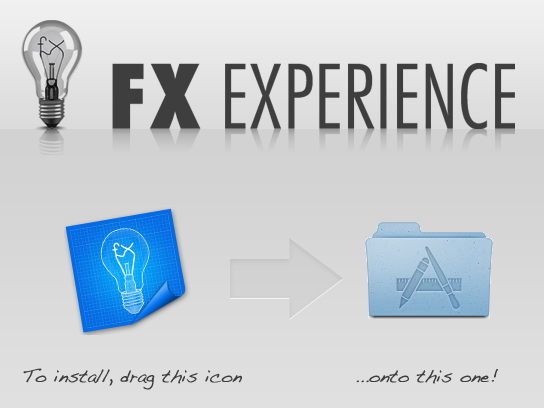
<style>
.page{position:relative;width:544px;height:408px}
.page>*{position:absolute;margin:0}
.t1{font:18px "Handwriting-Dakota";color:#3e3e3e}
</style>
<div class="page">
<p class="t1" style="left:23px;top:368px;width:219px;height:22px">To install, drag this icon</p>
<p class="t1" style="left:356px;top:369px;width:142px;height:15px">...onto this one!</p>
</div>
